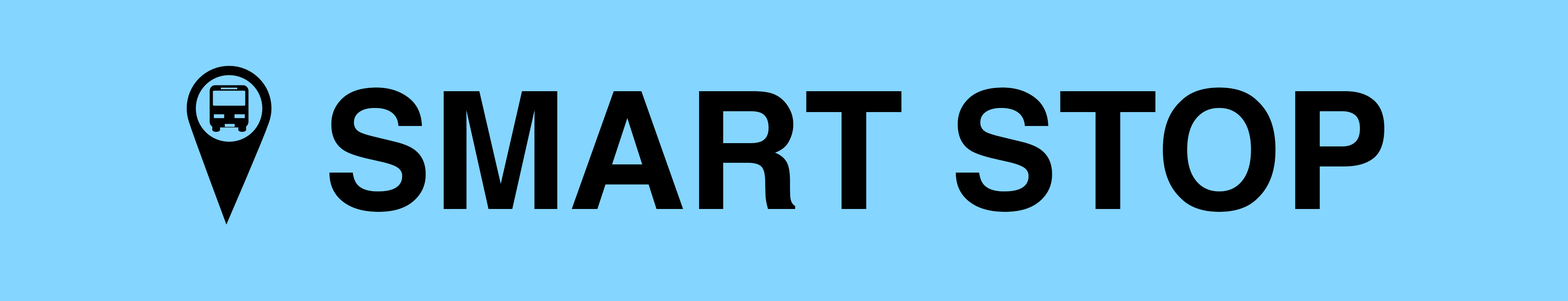
<style>
.page{position:relative;width:1568px;height:301px;background:#84d5ff}
.page>*{position:absolute;margin:0}
.t1{font:163.3px "Helvetica-Bold";color:#000000}
</style>
<div class="page">
<p class="t1" style="left:329px;top:87px;width:1056px;height:125px">SMART STOP</p>
</div>
